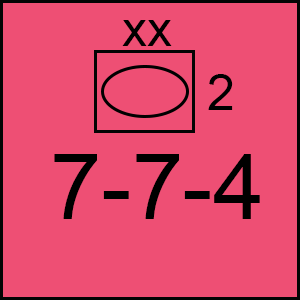
<style>
.page{position:relative;width:300px;height:300px;background:#ee4f74}
.page>*{position:absolute;margin:0}
.t1{font:50px "ArialMT";color:#000000}
.t2{font:91.7px "ArialMT";color:#000000}
</style>
<div class="page">
<p class="t1" style="left:122px;top:20px;width:50px;height:26px">xx</p>
<p class="t1" style="left:208px;top:74px;width:25px;height:36px">2</p>
<p class="t2" style="left:54px;top:154px;width:206px;height:65px">7-7-4</p>
</div>
